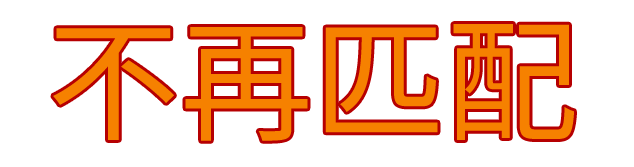
<style>
.page{position:relative;width:634px;height:167px;background:#ffffff}
.page>*{position:absolute;margin:0}
.t1{font:132.9px "SourceHanSansCN-Regular";color:#f68100}
</style>
<div class="page">
<p class="t1" style="left:53px;top:24px;width:521px;height:117px">不再匹配</p>
</div>
